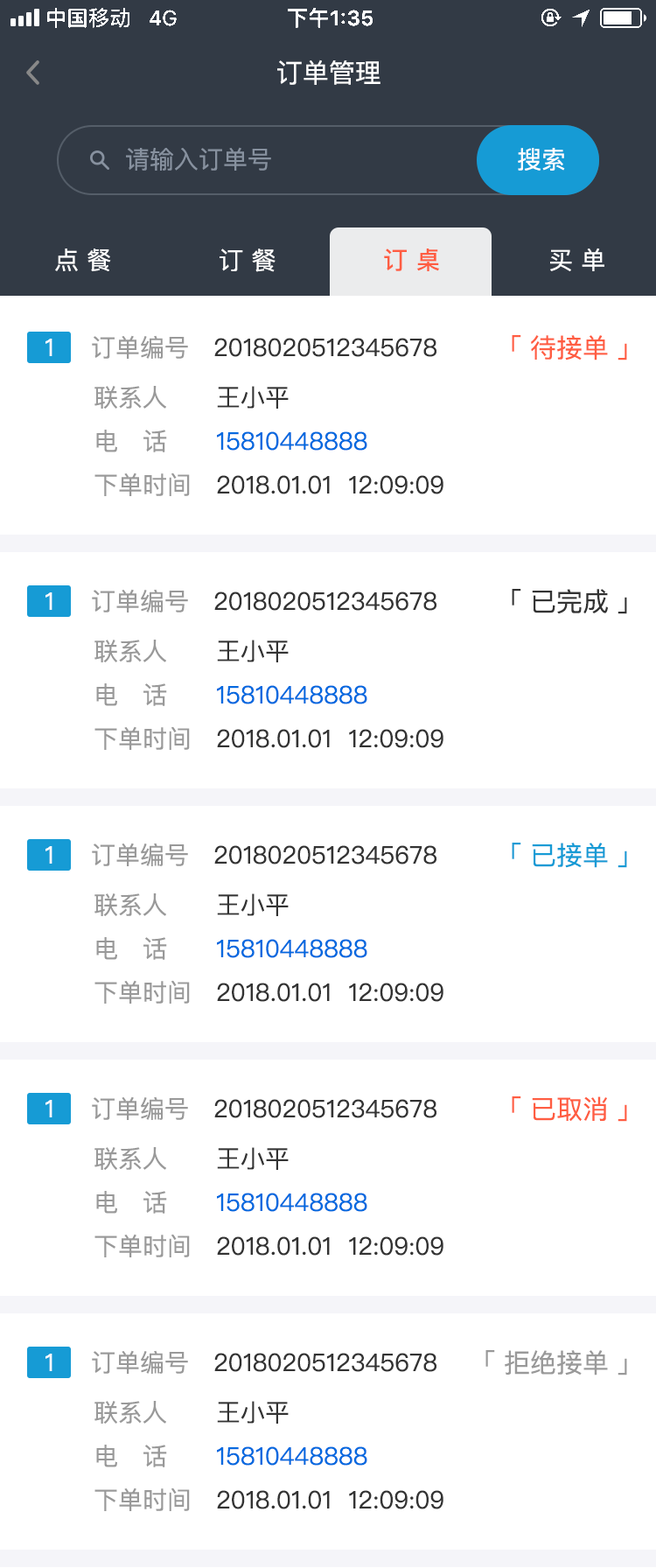
<style>
.page{position:relative;width:656px;height:1568px;background:#ffffff}
.page>*{position:absolute;margin:0}
.t1{font:26.2px "PingFangSC-Regular";color:#ffffff}
.t2{font:24.5px "PingFangSC-Regular";color:#87919f}
.t3{font:24.5px "PingFangSC-Regular";color:#ffffff}
.t4{font:24.5px "PingFangSC-Medium";color:#ff5d42}
.t5{font:24.5px "PingFangSC-Regular";color:#333333}
.t6{font:24.5px "PingFangSC-Regular";color:#999999}
.t7{font:26.2px "PingFangSC-Regular";color:#ff5d42}
.t8{font:24.5px/43.8px "PingFangSC-Regular";color:#999999}
.t9{font:24.5px/43.8px "PingFangSC-Regular";color:#333333}
.t10{font:24.5px/43.8px "PingFangSC-Regular";color:#0069df}
.t11{font:26.2px "PingFangSC-Regular";color:#333333}
.t12{font:26.2px "PingFangSC-Regular";color:#169bd5}
.t13{font:26.2px "PingFangSC-Regular";color:#999999}
</style>
<div class="page">
<p class="t1" style="left:277px;top:60px;width:104px;height:25px">订单管理</p>
<p class="t2" style="left:126px;top:147px;width:145px;height:24px">请输入订单号</p>
<p class="t3" style="left:518px;top:148px;width:47px;height:23px">搜索</p>
<p class="t3" style="left:55px;top:248px;width:56px;height:23px">点 餐</p>
<p class="t3" style="left:220px;top:248px;width:56px;height:24px">订 餐</p>
<p class="t4" style="left:384px;top:248px;width:55px;height:23px">订 桌</p>
<p class="t3" style="left:550px;top:248px;width:55px;height:23px">买 单</p>
<p class="t3" style="left:46px;top:339px;width:6px;height:17px">1</p>
<p class="t5" style="left:92px;top:335px;width:345px;height:24px"><span class="t6">订单编号   </span>2018020512345678</p>
<p class="t7" style="left:512px;top:335px;width:115px;height:25px">「 待接单 」</p>
<p class="t5" style="left:94px;top:386px;width:350px;height:110px"><span class="t8">联系人      </span><span class="t9">王小平<br></span><span class="t6">电   话      </span><span class="t10">15810448888<br></span><span class="t6">下单时间   </span>2018.01.01  12:09:09</p>
<p class="t3" style="left:46px;top:592px;width:6px;height:18px">1</p>
<p class="t5" style="left:92px;top:589px;width:345px;height:23px"><span class="t6">订单编号   </span>2018020512345678</p>
<p class="t11" style="left:512px;top:589px;width:115px;height:25px">「 已完成 」</p>
<p class="t5" style="left:94px;top:640px;width:350px;height:110px"><span class="t8">联系人      </span><span class="t9">王小平<br></span><span class="t6">电   话      </span><span class="t10">15810448888<br></span><span class="t6">下单时间   </span>2018.01.01  12:09:09</p>
<p class="t5" style="left:92px;top:843px;width:345px;height:23px"><span class="t6">订单编号   </span>2018020512345678</p>
<p class="t12" style="left:512px;top:843px;width:115px;height:25px">「 已接单 」</p>
<p class="t3" style="left:46px;top:846px;width:6px;height:18px">1</p>
<p class="t5" style="left:94px;top:893px;width:350px;height:111px"><span class="t8">联系人      </span><span class="t9">王小平<br></span><span class="t6">电   话      </span><span class="t10">15810448888<br></span><span class="t6">下单时间   </span>2018.01.01  12:09:09</p>
<p class="t5" style="left:92px;top:1096px;width:345px;height:24px"><span class="t6">订单编号   </span>2018020512345678</p>
<p class="t7" style="left:512px;top:1096px;width:115px;height:26px">「 已取消 」</p>
<p class="t3" style="left:46px;top:1100px;width:6px;height:17px">1</p>
<p class="t5" style="left:94px;top:1147px;width:350px;height:110px"><span class="t8">联系人      </span><span class="t9">王小平<br></span><span class="t6">电   话      </span><span class="t10">15810448888<br></span><span class="t6">下单时间   </span>2018.01.01  12:09:09</p>
<p class="t3" style="left:46px;top:1354px;width:6px;height:17px">1</p>
<p class="t5" style="left:92px;top:1350px;width:345px;height:24px"><span class="t6">订单编号   </span>2018020512345678</p>
<p class="t13" style="left:486px;top:1350px;width:141px;height:26px">「 拒绝接单 」</p>
<p class="t5" style="left:94px;top:1401px;width:350px;height:110px"><span class="t8">联系人      </span><span class="t9">王小平<br></span><span class="t6">电   话      </span><span class="t10">15810448888<br></span><span class="t6">下单时间   </span>2018.01.01  12:09:09</p>
</div>
